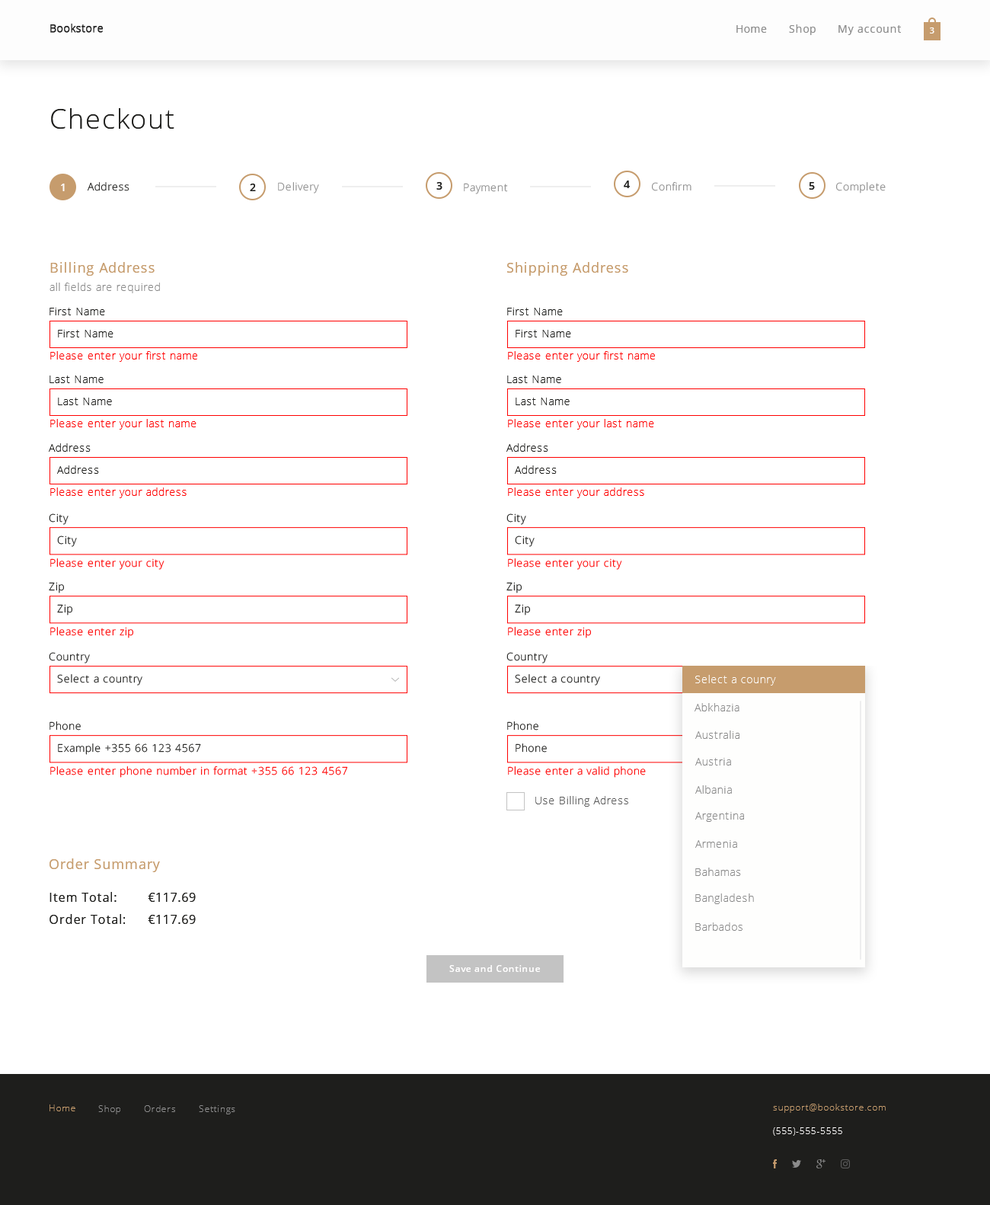
<style>
.page{position:relative;width:990px;height:1205px;background:#ffffff}
.page>*{position:absolute;margin:0}
.t1{font:27.4px "OpenSans-Light";letter-spacing:0.05em;color:#1e1e1c}
.t2{font:10.7px "OpenSans-Semibold";letter-spacing:0.05em;color:#fefcfc}
.t3{font:10.7px "OpenSans-Light";letter-spacing:0.05em}
.t4{font:10.7px "OpenSans-Semibold";letter-spacing:0.05em;color:#1e1e1c}
.t5{font:10.7px "OpenSans-Light";letter-spacing:0.05em;color:#8c8c8c}
.t6{font:13.7px "OpenSans";letter-spacing:0.05em;color:#c69c6d}
.t7{font:10.7px "OpenSans-Light";letter-spacing:0.05em;color:#1e1e1c}
.t8{font:10.7px "OpenSans-Light";letter-spacing:0.05em;color:#ff0000}
.t9{font:10.7px "OpenSans-Light";letter-spacing:0.05em;color:#5c5c5c}
.t10{font:12.2px "OpenSans";letter-spacing:0.05em;color:#1e1e1c}
.t11{font:9.1px "OpenSans-Semibold";letter-spacing:0.05em;color:#fffefe}
</style>
<div class="page">
<p class="t1" style="left:51px;top:108px;width:123px;height:21px">Checkout</p>
<p class="t2" style="left:61px;top:184px;width:4px;height:7px">1</p>
<p class="t3" style="left:88px;top:182px;width:41px;height:9px">Address</p>
<p class="t4" style="left:250px;top:184px;width:6px;height:7px">2</p>
<p class="t5" style="left:278px;top:182px;width:41px;height:11px">Delivery</p>
<p class="t4" style="left:436px;top:182px;width:6px;height:8px">3</p>
<p class="t5" style="left:464px;top:183px;width:44px;height:11px">Payment</p>
<p class="t4" style="left:624px;top:180px;width:6px;height:8px">4</p>
<p class="t5" style="left:652px;top:182px;width:39px;height:9px">Confirm</p>
<p class="t4" style="left:809px;top:182px;width:6px;height:8px">5</p>
<p class="t5" style="left:836px;top:182px;width:50px;height:11px">Complete</p>
<p class="t6" style="left:50px;top:262px;width:105px;height:14px">Billing Address</p>
<p class="t6" style="left:507px;top:262px;width:121px;height:14px">Shipping Address</p>
<p class="t5" style="left:49px;top:282px;width:111px;height:11px">all fields are required</p>
<p class="t7" style="left:49px;top:308px;width:56px;height:7px">First Name</p>
<p class="t7" style="left:507px;top:308px;width:56px;height:7px">First Name</p>
<p class="t7" style="left:58px;top:330px;width:55px;height:7px">First Name</p>
<p class="t7" style="left:516px;top:330px;width:55px;height:7px">First Name</p>
<p class="t8" style="left:50px;top:351px;width:147px;height:11px">Please enter your first name</p>
<p class="t8" style="left:508px;top:351px;width:147px;height:11px">Please enter your first name</p>
<p class="t7" style="left:49px;top:375px;width:55px;height:8px">Last Name</p>
<p class="t7" style="left:507px;top:375px;width:54px;height:8px">Last Name</p>
<p class="t7" style="left:58px;top:397px;width:54px;height:8px">Last Name</p>
<p class="t7" style="left:516px;top:397px;width:54px;height:8px">Last Name</p>
<p class="t8" style="left:50px;top:419px;width:146px;height:10px">Please enter your last name</p>
<p class="t8" style="left:508px;top:419px;width:146px;height:10px">Please enter your last name</p>
<p class="t7" style="left:49px;top:443px;width:42px;height:9px">Address</p>
<p class="t7" style="left:506px;top:443px;width:42px;height:9px">Address</p>
<p class="t7" style="left:57px;top:465px;width:42px;height:9px">Address</p>
<p class="t7" style="left:515px;top:465px;width:42px;height:9px">Address</p>
<p class="t8" style="left:50px;top:487px;width:137px;height:11px">Please enter your address</p>
<p class="t8" style="left:508px;top:487px;width:136px;height:11px">Please enter your address</p>
<p class="t3" style="left:49px;top:513px;width:20px;height:12px">City</p>
<p class="t3" style="left:506px;top:513px;width:20px;height:12px">City</p>
<p class="t3" style="left:57px;top:535px;width:20px;height:12px">City</p>
<p class="t3" style="left:515px;top:535px;width:20px;height:12px">City</p>
<p class="t3" style="left:50px;top:558px;width:114px;height:12px">Please enter your city</p>
<p class="t3" style="left:508px;top:558px;width:114px;height:12px">Please enter your city</p>
<p class="t7" style="left:49px;top:582px;width:15px;height:11px">Zip</p>
<p class="t7" style="left:506px;top:582px;width:16px;height:11px">Zip</p>
<p class="t7" style="left:57px;top:604px;width:15px;height:11px">Zip</p>
<p class="t7" style="left:515px;top:604px;width:15px;height:11px">Zip</p>
<p class="t3" style="left:50px;top:627px;width:83px;height:11px">Please enter zip</p>
<p class="t3" style="left:508px;top:627px;width:83px;height:11px">Please enter zip</p>
<p class="t3" style="left:49px;top:652px;width:41px;height:11px">Country</p>
<p class="t3" style="left:506px;top:652px;width:41px;height:11px">Country</p>
<p class="t3" style="left:57px;top:674px;width:85px;height:11px">Select a country</p>
<p class="t3" style="left:515px;top:674px;width:85px;height:11px">Select a country</p>
<p class="t3" style="left:49px;top:721px;width:32px;height:9px">Phone</p>
<p class="t3" style="left:507px;top:721px;width:31px;height:9px">Phone</p>
<p class="t7" style="left:58px;top:743px;width:143px;height:12px">Example +355 66 123 4567</p>
<p class="t3" style="left:516px;top:743px;width:31px;height:9px">Phone</p>
<p class="t3" style="left:50px;top:766px;width:298px;height:11px">Please enter phone number in format +355 66 123 4567</p>
<p class="t8" style="left:508px;top:766px;width:138px;height:11px">Please enter a valid phone number</p>
<p class="t9" style="left:535px;top:796px;width:93px;height:10px">Use Billing Adress</p>
<p class="t6" style="left:49px;top:858px;width:111px;height:14px">Order Summary</p>
<p class="t10" style="left:49px;top:892px;width:68px;height:10px">Item Total:</p>
<p class="t10" style="left:148px;top:892px;width:48px;height:10px">€117.69</p>
<p class="t10" style="left:49px;top:914px;width:76px;height:10px">Order Total:</p>
<p class="t10" style="left:148px;top:915px;width:48px;height:9px">€117.69</p>
<p class="t11" style="left:449px;top:965px;width:91px;height:7px">Save and Continue</p>
</div>
